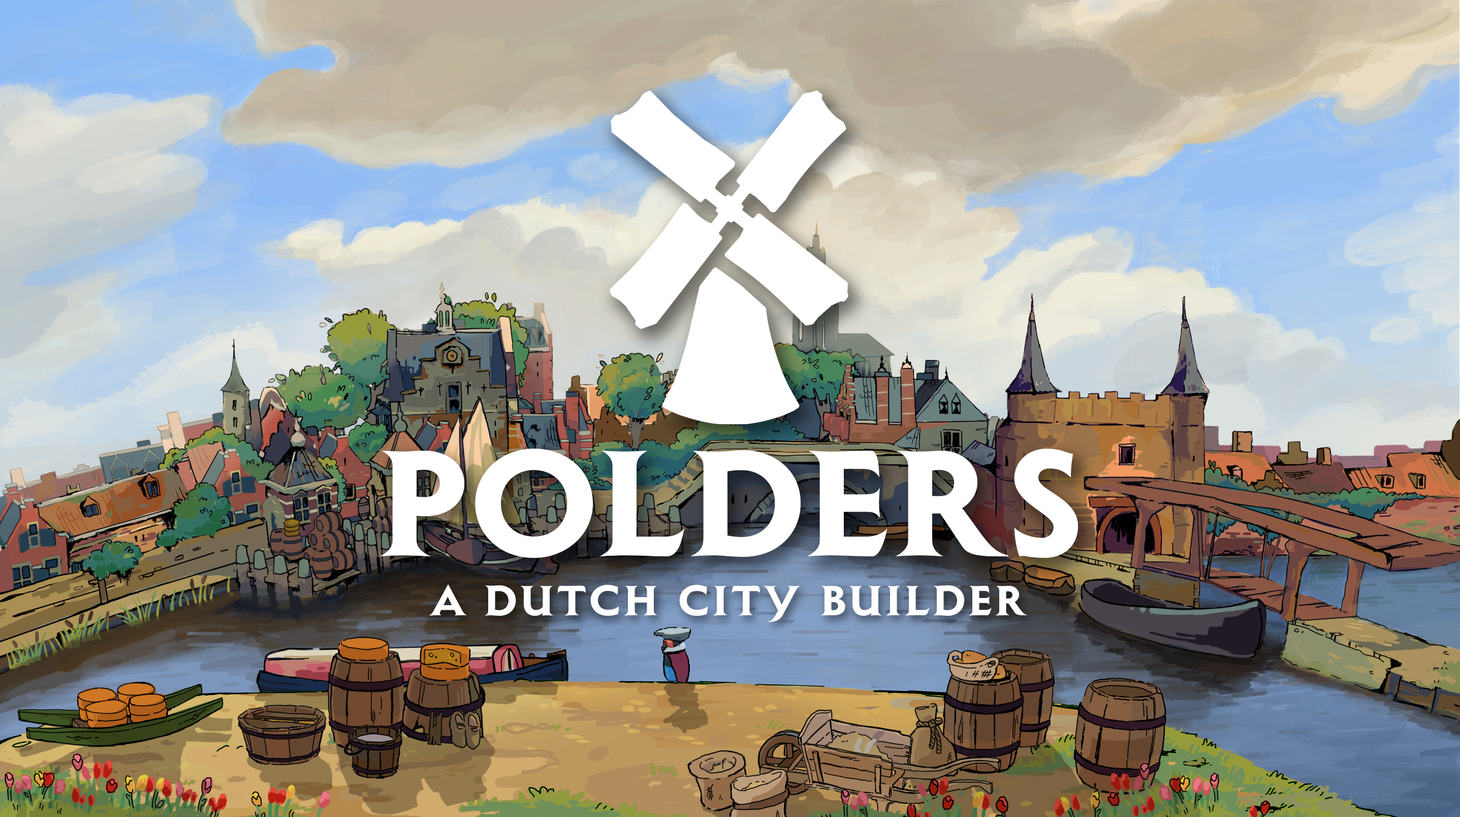
<style>
.page{position:relative;width:1460px;height:817px}
.page>*{position:absolute;margin:0}
.t1{font:148px "ShangoGothic-ExtraBold";letter-spacing:0.01em;color:#ffffff;scale:1.1 1}
.t2{font:42px "ShangoGothic-ExtraBold";letter-spacing:0.06em;color:#ffffff;scale:1.1 1}
</style>
<div class="page">
<p class="t1" style="left:379px;top:449px;width:699px;height:109px">POLDERS</p>
<p class="t2" style="left:429px;top:584px;width:599px;height:38px">A Dutch City Builder</p>
</div>
